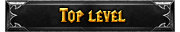
<style>
.page{position:relative;width:180px;height:32px}
.page>*{position:absolute;margin:0}
.t1{font:20px "LifeCraft"}
</style>
<div class="page">
<p class="t1" style="left:59px;top:8px;width:67px;height:15px">Top level</p>
</div>
